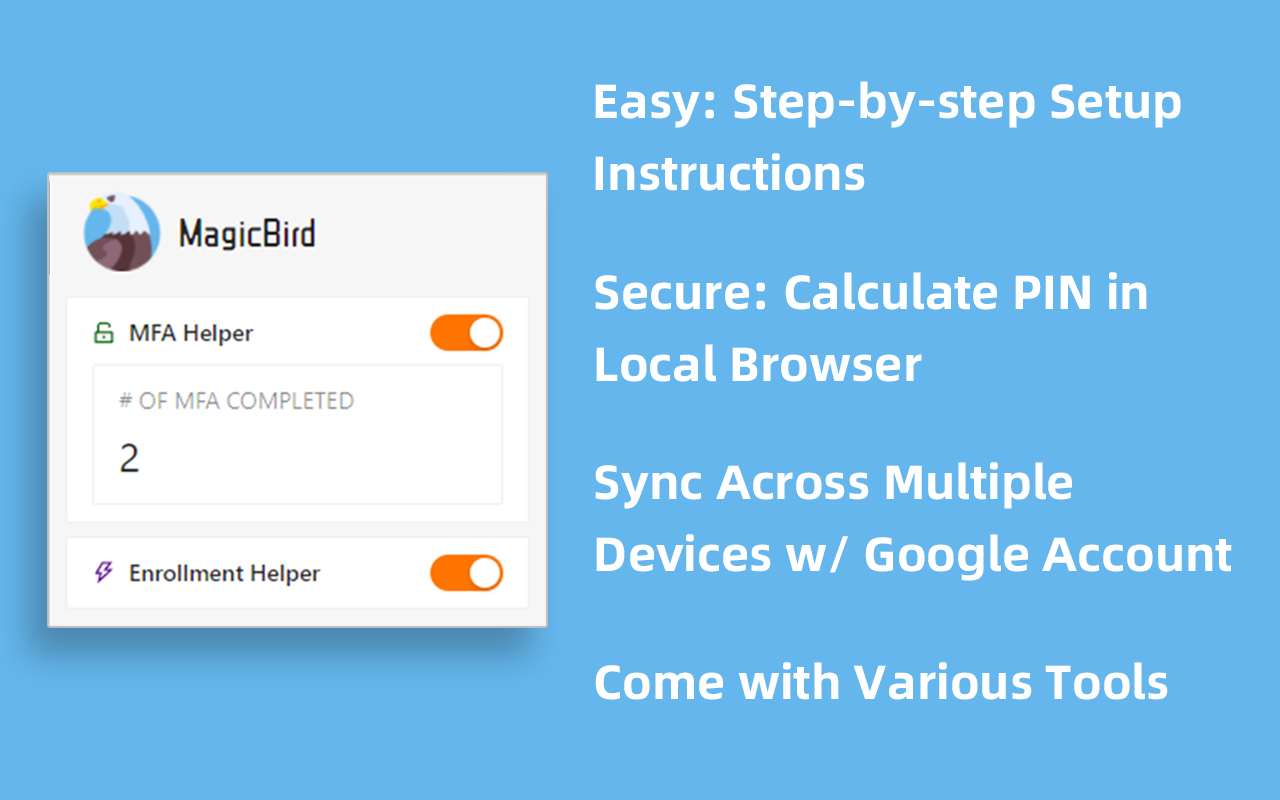
<style>
.page{position:relative;width:1280px;height:800px;background:#64b6ec}
.page>*{position:absolute;margin:0}
.t1{font:48px/72px "AlibabaPuHuiTi-Bold";color:#ffffff}
.t2{font:48px "AlibabaPuHuiTi-Bold";color:#ffffff}
</style>
<div class="page">
<p class="t1" style="left:595px;top:81px;width:586px;height:110px">Easy: Step-by-step Setup <br>Instructions</p>
<p class="t1" style="left:595px;top:272px;width:552px;height:110px">Secure: Calculate PIN in<br>Local Browser</p>
<p class="t1" style="left:595px;top:462px;width:637px;height:119px">Sync Across Multiple <br>Devices w/ Google Account</p>
<p class="t2" style="left:595px;top:662px;width:573px;height:38px">Come with Various Tools</p>
</div>
